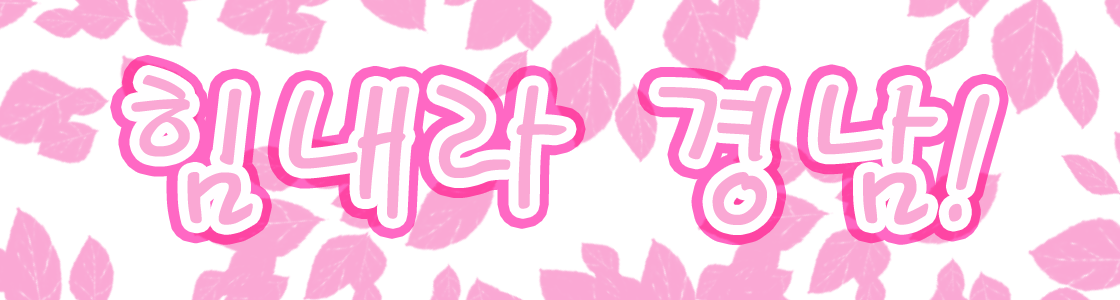
<style>
.page{position:relative;width:1120px;height:300px;background:#ffffff}
.page>*{position:absolute;margin:0}
.t1{font:171.1px "PyunjiR-HM";color:#faa8d4}
</style>
<div class="page">
<p class="t1" style="left:130px;top:75px;width:859px;height:150px">힘내라 경남!</p>
<p class="t1" style="left:131px;top:75px;width:859px;height:150px">힘내라 경남!</p>
</div>
